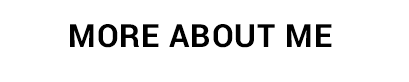
<style>
.page{position:relative;width:409px;height:82px;background:#ffffff}
.page>*{position:absolute;margin:0}
.t1{font:35.5px "Yantramanav-Bold";letter-spacing:0.02em;color:#000000;text-transform:uppercase}
</style>
<div class="page">
<p class="t1" style="left:70px;top:24px;width:262px;height:24px">More about me</p>
</div>
